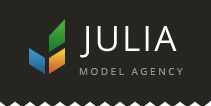
<style>
.page{position:relative;width:211px;height:106px;background:#272521}
.page>*{position:absolute;margin:0}
.t1{font:35px "OpenSans";letter-spacing:0.06em;color:#ffffff}
.t2{font:10px "OpenSans";letter-spacing:0.25em;color:#a4a4a4}
</style>
<div class="page">
<p class="t1" style="left:80px;top:26px;width:97px;height:32px">JULIA</p>
<p class="t2" style="left:79px;top:68px;width:104px;height:7px;opacity:0.9">MODEL AGENCY</p>
</div>
